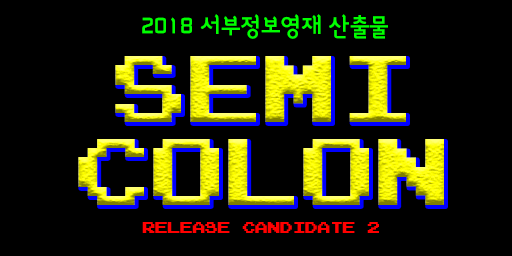
<style>
.page{position:relative;width:512px;height:256px;background:#000000}
.page>*{position:absolute;margin:0}
.t1{font:25px "SangSangTitleOTFB";color:#00ff00}
.t2{font:75px/83.3px "Emulogic"}
.t3{font:12.5px "Emulogic";color:#ff0000}
</style>
<div class="page">
<p class="t1" style="left:142px;top:14px;width:246px;height:25px">2018 서부정보영재 산출물</p>
<p class="t2" style="left:78px;top:56px;width:366px;height:149px;text-align:center">Semi<br>colon</p>
<p class="t3" style="left:142px;top:222px;width:237px;height:11px">Release candidate 2</p>
</div>
